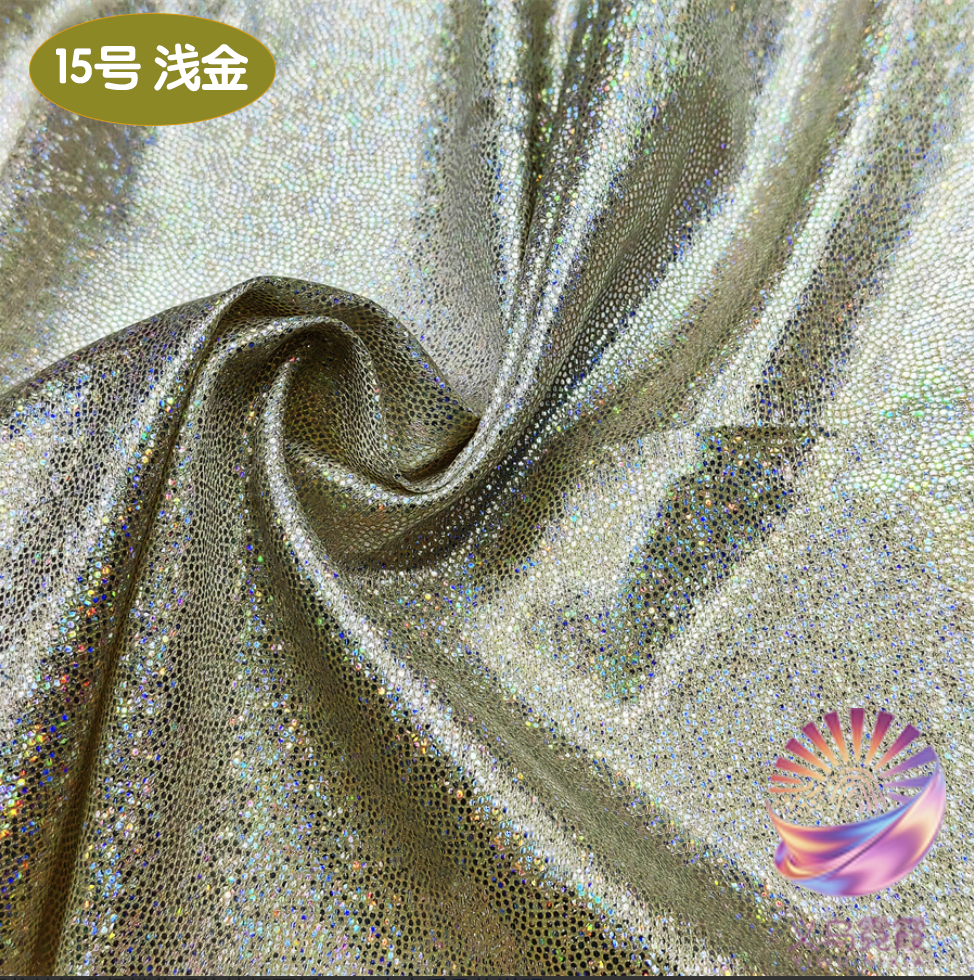
<style>
.page{position:relative;width:974px;height:980px}
.page>*{position:absolute;margin:0}
.t1{font:49.1px "STYuanti-SC-Bold";color:#ffffff;scale:0.97 1}
.t2{font:84.6px "STBaoliSC-Regular";color:#ffffff;scale:0.97 1}
</style>
<div class="page">
<p class="t1" style="left:56px;top:43px;width:192px;height:49px"><span class="t2">         </span>15号 浅金</p>
</div>
